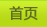
<style>
.page{position:relative;width:47px;height:27px}
.page>*{position:absolute;margin:0}
.t1{font:14px "MicrosoftYaHei";color:#5d6f23;font-weight:bold}
</style>
<div class="page">
<p class="t1" style="left:9px;top:6px;width:29px;height:15px">首页</p>
</div>
